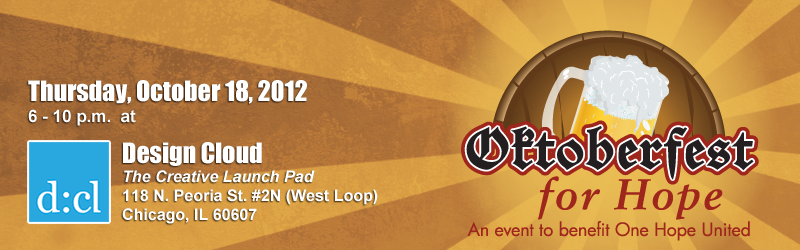
<style>
.page{position:relative;width:800px;height:250px}
.page>*{position:absolute;margin:0}
.t1{font:16px "Arial-BoldMT";color:#ffffff}
.t2{font:26px "Impact";color:#ffffff}
.t3{font:17px "Arial-BoldMT";color:#ffffff}
.t4{font:16px "Arial-BoldItalicMT";color:#ffffff}
</style>
<div class="page">
<p class="t1" style="left:28px;top:80px;width:350px;height:144px"><span class="t2">Thursday, October 18, 2012<br></span><span class="t3">6 - 10 p.m.  at<br></span><span class="t2">Design Cloud<br></span><span class="t4">The Creative Launch Pad<br></span>118 N. Peoria St. #2N (West Loop)<br>Chicago, IL 60607</p>
</div>
